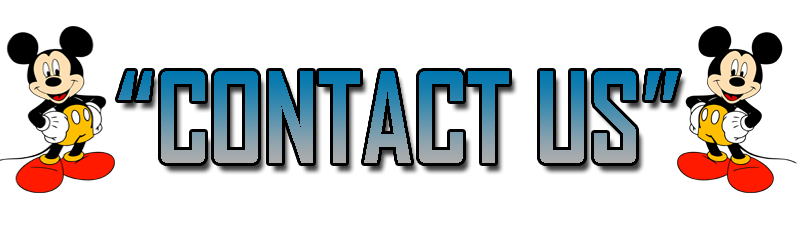
<style>
.page{position:relative;width:800px;height:250px;background:#ffffff}
.page>*{position:absolute;margin:0}
.t1{font:120.1px "AgencyFB-Bold";scale:0.95 1}
</style>
<div class="page">
<p class="t1" style="left:118px;top:71px;width:561px;height:92px">“CONTACT US”</p>
</div>
